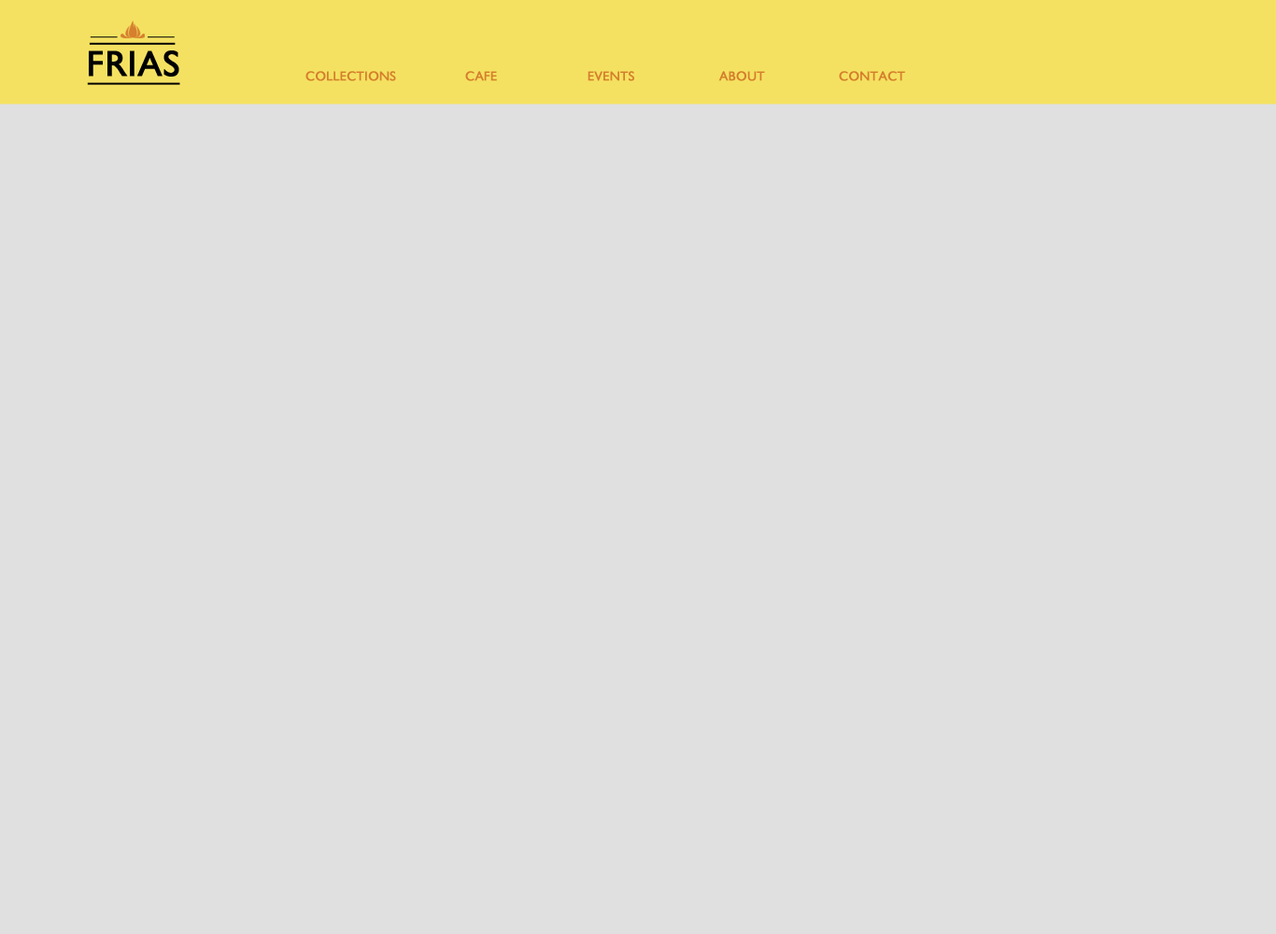
<style>
.page{position:relative;width:1276px;height:934px;background:#e0e0e0}
.page>*{position:absolute;margin:0}
.t1{font:36.2px "GillSansMT";color:#000000;font-weight:bold}
.t2{font:13.1px "GillSansMT";color:#d57e2c;font-weight:bold}
</style>
<div class="page">
<p class="t1" style="left:89px;top:50px;width:90px;height:27px">FRIAS</p>
<p class="t2" style="left:306px;top:71px;width:90px;height:10px">COLLECTIONS</p>
<p class="t2" style="left:465px;top:71px;width:32px;height:10px">CAFE</p>
<p class="t2" style="left:588px;top:71px;width:46px;height:10px">EVENTS</p>
<p class="t2" style="left:718px;top:71px;width:47px;height:10px">ABOUT</p>
<p class="t2" style="left:839px;top:71px;width:66px;height:10px">CONTACT</p>
</div>
